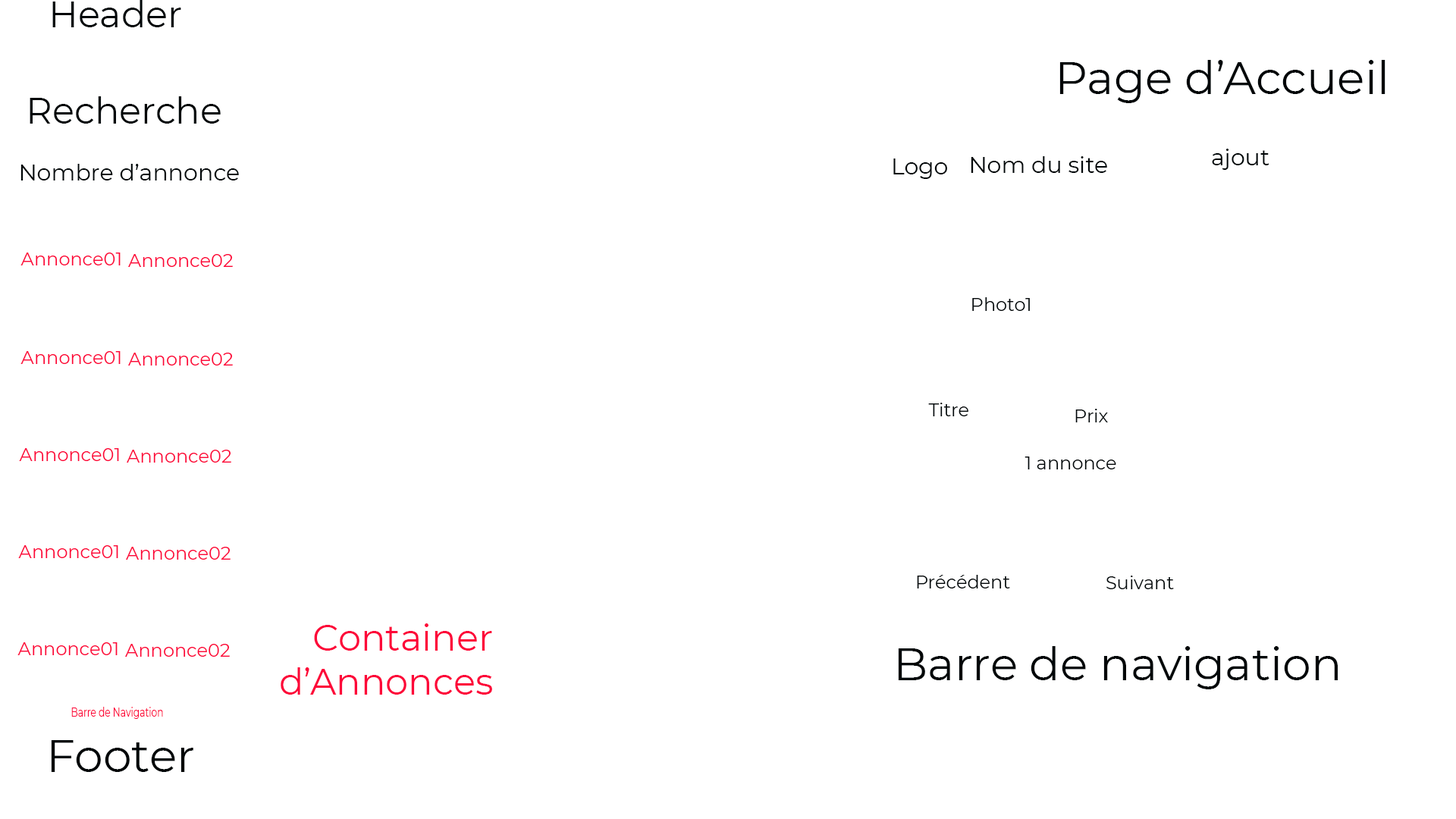
<style>
.page{position:relative;width:1456px;height:819px;background:#ffffff}
.page>*{position:absolute;margin:0}
.t1{font:36.4px "Montserrat-Regular";color:#000608}
.t2{font:45.5px "Montserrat-Regular";color:#000608}
.t3{font:22.7px "Montserrat-Regular";color:#000608}
.t4{font:18.2px "Montserrat-Regular";color:#fd0439}
.t5{font:18.2px "Montserrat-Regular";color:#000608}
.t6{font:36.4px "Montserrat-Regular";color:#fd0439}
.t7{font:12px "Montserrat-Regular";color:#fd0439;scale:0.77 1}
</style>
<div class="page">
<p class="t1" style="left:52px;top:0px;width:129px;height:27px">Header</p>
<p class="t2" style="left:1059px;top:60px;width:326px;height:43px">Page d’Accueil</p>
<p class="t1" style="left:30px;top:96px;width:191px;height:28px">Recherche</p>
<p class="t3" style="left:1212px;top:149px;width:57px;height:21px">ajout</p>
<p class="t3" style="left:893px;top:158px;width:54px;height:21px">Logo</p>
<p class="t3" style="left:971px;top:156px;width:136px;height:17px">Nom du site</p>
<p class="t3" style="left:20px;top:164px;width:219px;height:16px">Nombre d’annonce</p>
<p class="t4" style="left:20px;top:253px;width:101px;height:12px">Annonce01</p>
<p class="t4" style="left:128px;top:254px;width:105px;height:13px">Annonce02</p>
<p class="t5" style="left:972px;top:297px;width:58px;height:14px">Photo1</p>
<p class="t4" style="left:20px;top:351px;width:101px;height:13px">Annonce01</p>
<p class="t4" style="left:128px;top:353px;width:105px;height:13px">Annonce02</p>
<p class="t5" style="left:928px;top:403px;width:40px;height:13px">Titre</p>
<p class="t5" style="left:1075px;top:409px;width:33px;height:13px">Prix</p>
<p class="t4" style="left:19px;top:448px;width:100px;height:13px">Annonce01</p>
<p class="t4" style="left:127px;top:450px;width:104px;height:13px">Annonce02</p>
<p class="t5" style="left:1024px;top:457px;width:92px;height:12px">1 annonce</p>
<p class="t4" style="left:18px;top:545px;width:100px;height:13px">Annonce01</p>
<p class="t4" style="left:126px;top:547px;width:105px;height:13px">Annonce02</p>
<p class="t5" style="left:917px;top:575px;width:93px;height:13px">Précédent</p>
<p class="t5" style="left:1106px;top:576px;width:68px;height:13px">Suivant</p>
<p class="t6" style="left:281px;top:623px;width:211px;height:72px;text-align:right">Container<br> d’Annonces</p>
<p class="t4" style="left:17px;top:642px;width:101px;height:13px">Annonce01</p>
<p class="t4" style="left:125px;top:644px;width:105px;height:13px">Annonce02</p>
<p class="t2" style="left:898px;top:646px;width:440px;height:43px">Barre de navigation</p>
<p class="t7" style="left:71px;top:707px;width:92px;height:12px">Barre de Navigation</p>
<p class="t2" style="left:51px;top:740px;width:142px;height:32px">Footer</p>
</div>
